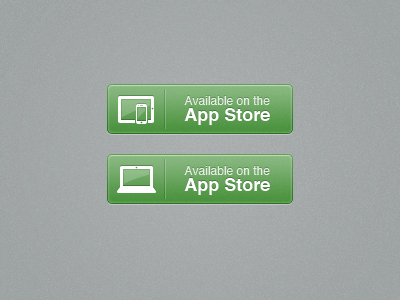
<style>
.page{position:relative;width:400px;height:300px}
.page>*{position:absolute;margin:0}
.t1{font:12px "Helvetica";color:#e4efe2}
.t2{font:18px "Helvetica-Bold";color:#ffffff}
</style>
<div class="page">
<p class="t1" style="left:184px;top:96px;width:86px;height:9px">Available on the</p>
<p class="t2" style="left:184px;top:108px;width:86px;height:17px">App Store</p>
<p class="t1" style="left:184px;top:166px;width:86px;height:9px">Available on the</p>
<p class="t2" style="left:184px;top:178px;width:86px;height:17px">App Store</p>
</div>
